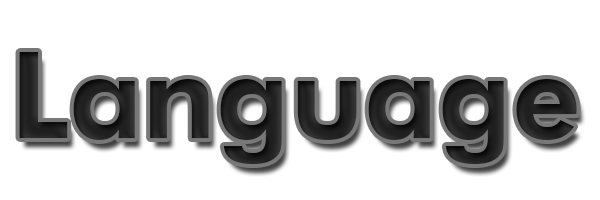
<style>
.page{position:relative;width:600px;height:200px;background:#ffffff}
.page>*{position:absolute;margin:0}
.t1{font:120px "FuturaBT-Heavy";color:#212121}
</style>
<div class="page">
<p class="t1" style="left:19px;top:52px;width:558px;height:112px">Language</p>
</div>
